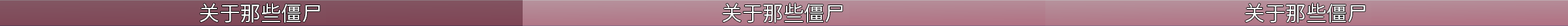
<style>
.page{position:relative;width:1568px;height:26px}
.page>*{position:absolute;margin:0}
.t1{font:20.6px "SourceHanSansSC-Normal";color:#ffffff}
</style>
<div class="page">
<p class="t1" style="left:200px;top:3px;width:120px;height:20px">关于那些僵尸</p>
<p class="t1" style="left:723px;top:3px;width:120px;height:20px">关于那些僵尸</p>
<p class="t1" style="left:1245px;top:3px;width:120px;height:20px">关于那些僵尸</p>
</div>
